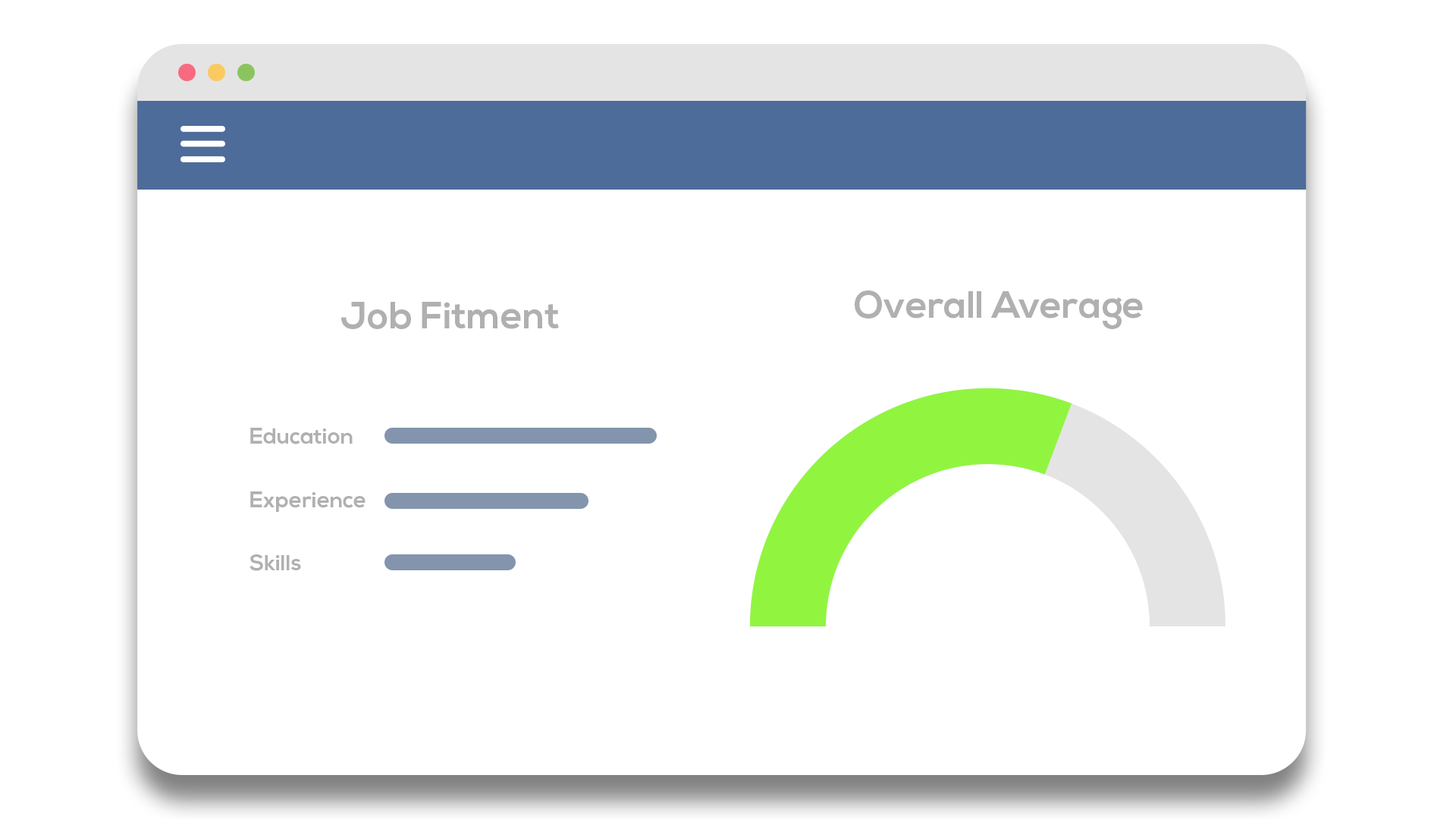
<style>
.page{position:relative;width:1456px;height:819px;background:#ffffff}
.page>*{position:absolute;margin:0}
.t1{font:37.9px "NexaBold";color:#b0b0b0}
.t2{font:22.1px/63.2px "NexaBold";color:#b0b0b0}
</style>
<div class="page">
<p class="t1" style="left:855px;top:290px;width:288px;height:39px">Overall Average</p>
<p class="t1" style="left:341px;top:302px;width:218px;height:27px">Job Fitment</p>
<p class="t2" style="left:249px;top:428px;width:117px;height:143px">Education<br>Experience<br>Skills</p>
</div>
